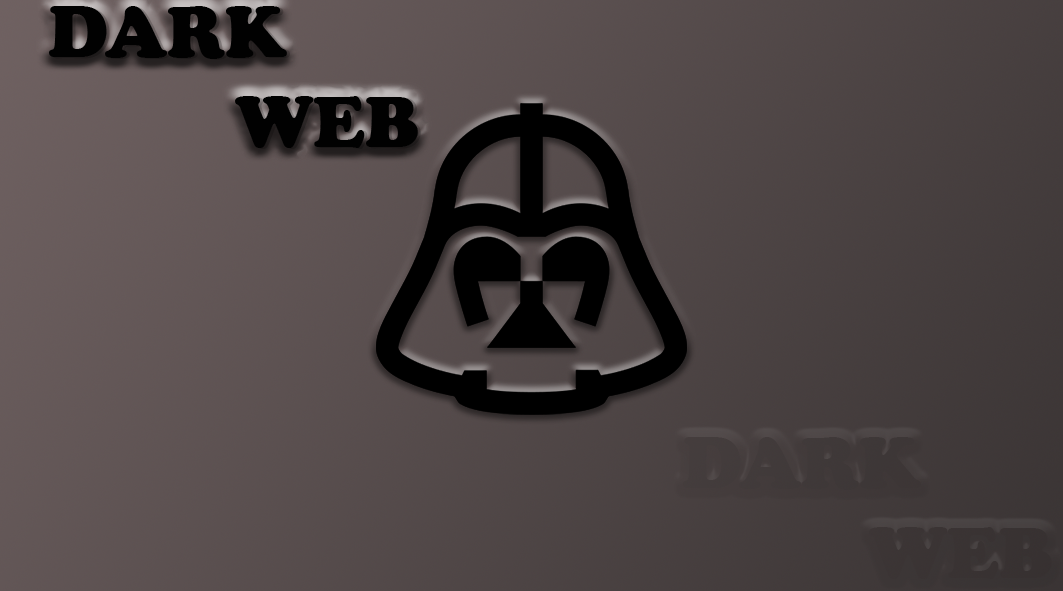
<style>
.page{position:relative;width:1063px;height:591px}
.page>*{position:absolute;margin:0}
.t1{font:75px "CooperBlack";color:#000000}
.t2{font:75px "CooperBlack";color:#3d3737}
</style>
<div class="page">
<p class="t1" style="left:49px;top:6px;width:369px;height:142px">DARK<br>          WEB</p>
<p class="t1" style="left:49px;top:6px;width:369px;height:142px;opacity:0.62">DARK<br>          WEB</p>
<p class="t1" style="left:52px;top:7px;width:369px;height:142px;opacity:0.28">DARK<br>          WEB</p>
<p class="t2" style="left:683px;top:437px;width:369px;height:142px">DARK<br>          WEB</p>
</div>
